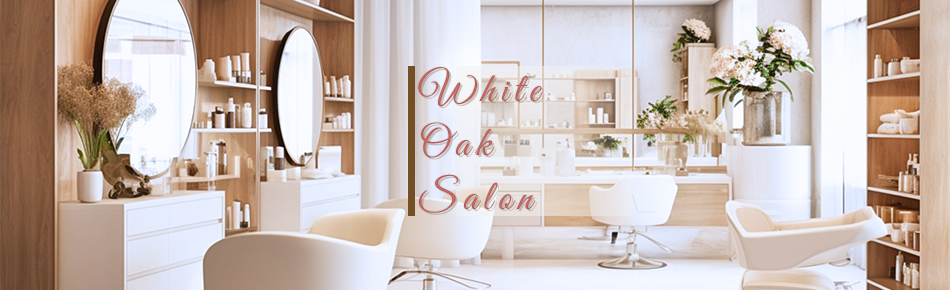
<style>
.page{position:relative;width:950px;height:290px}
.page>*{position:absolute;margin:0}
.t1{font:42px/54px "GreatVibes-Regular";letter-spacing:0.14em;color:#c36161}
</style>
<div class="page">
<p class="t1" style="left:418px;top:67px;width:125px;height:146px">White<br>Oak<br>Salon</p>
</div>
